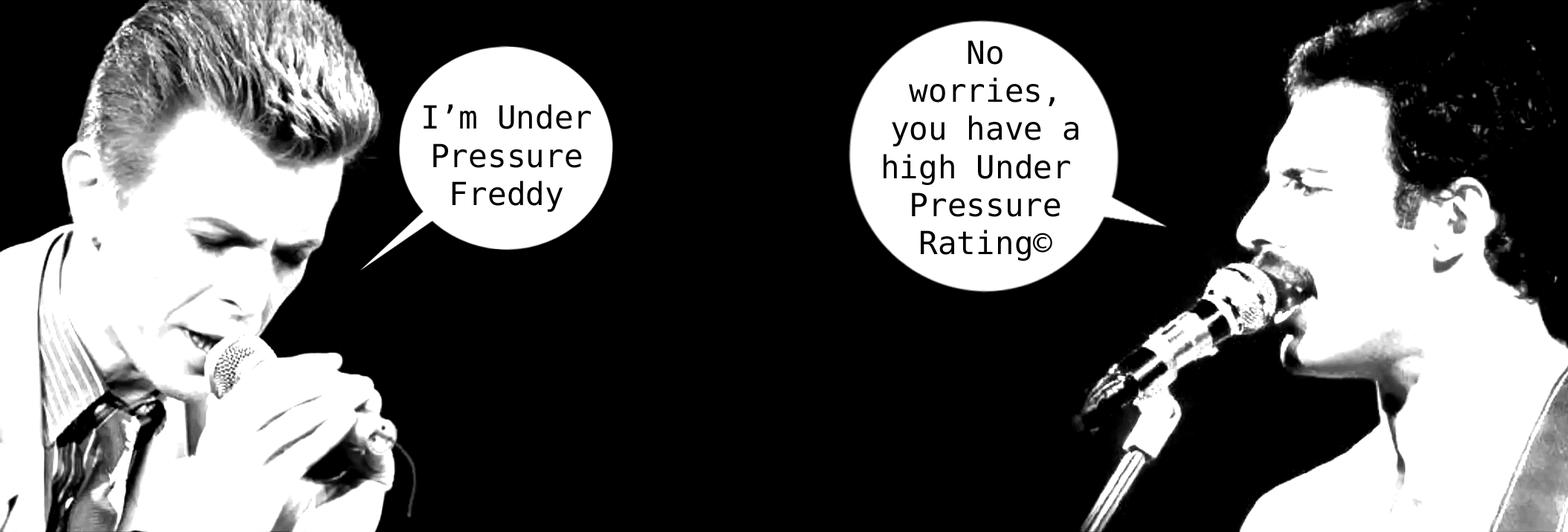
<style>
.page{position:relative;width:1568px;height:532px;background:#000000}
.page>*{position:absolute;margin:0}
.t1{font:31.7px "DejaVuSansMono";color:#000000}
</style>
<div class="page">
<p class="t1" style="left:884px;top:40px;width:194px;height:221px;text-align:center">No<br>worries,<br>you have a<br>high Under <br>Pressure<br>Rating©</p>
<p class="t1" style="left:424px;top:104px;width:167px;height:108px;text-align:center">I’m Under<br>Pressure<br>Freddy</p>
</div>
